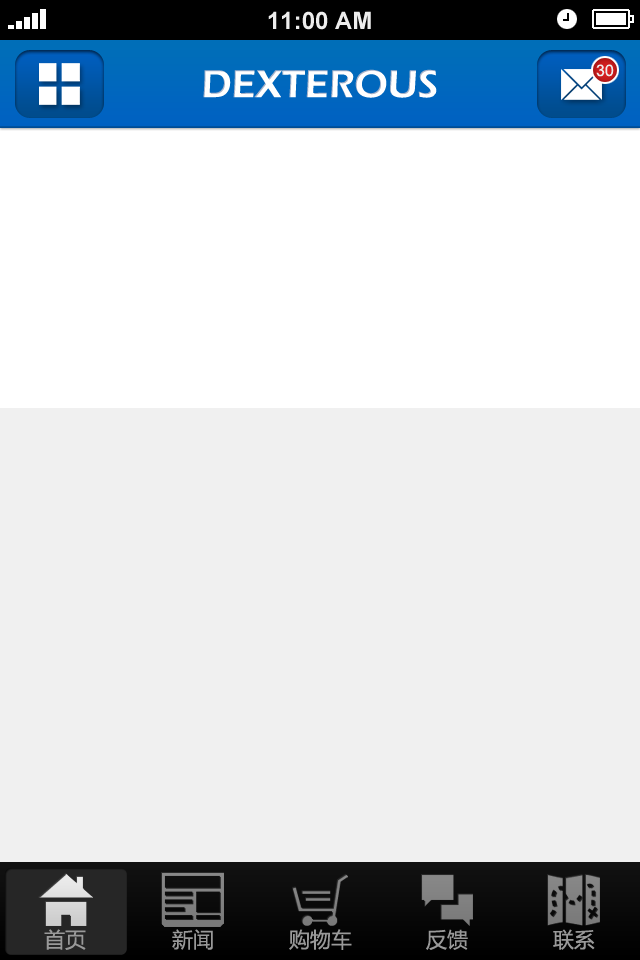
<style>
.page{position:relative;width:640px;height:960px;background:#f0f0f0}
.page>*{position:absolute;margin:0}
.t1{font:16px "ArialMT";color:#ededed;text-transform:uppercase}
.t2{font:40px "ErasITC-Demi";color:#ffffff;text-transform:uppercase}
.t3{font:21px "MicrosoftYaHei";color:#999999}
</style>
<div class="page">
<p class="t1" style="left:596px;top:64px;width:18px;height:13px">30</p>
<p class="t2" style="left:203px;top:69px;width:234px;height:29px">DEXTEROUS</p>
<p class="t3" style="left:44px;top:929px;width:42px;height:21px">首页</p>
<p class="t3" style="left:172px;top:929px;width:41px;height:21px">新闻</p>
<p class="t3" style="left:289px;top:929px;width:63px;height:21px">购物车</p>
<p class="t3" style="left:426px;top:929px;width:42px;height:21px">反馈</p>
<p class="t3" style="left:553px;top:929px;width:42px;height:21px">联系</p>
</div>
